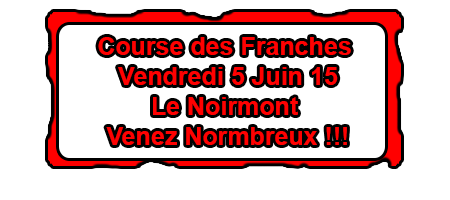
<style>
.page{position:relative;width:450px;height:200px;background:#ffffff}
.page>*{position:absolute;margin:0}
.t1{font:25px "Arial-BoldMT";color:#ff0101}
</style>
<div class="page">
<p class="t1" style="left:98px;top:37px;width:253px;height:108px;text-align:center">Course des Franches <br>Vendredi 5 Juin 15<br>Le Noirmont <br>Venez Normbreux !!!</p>
</div>
